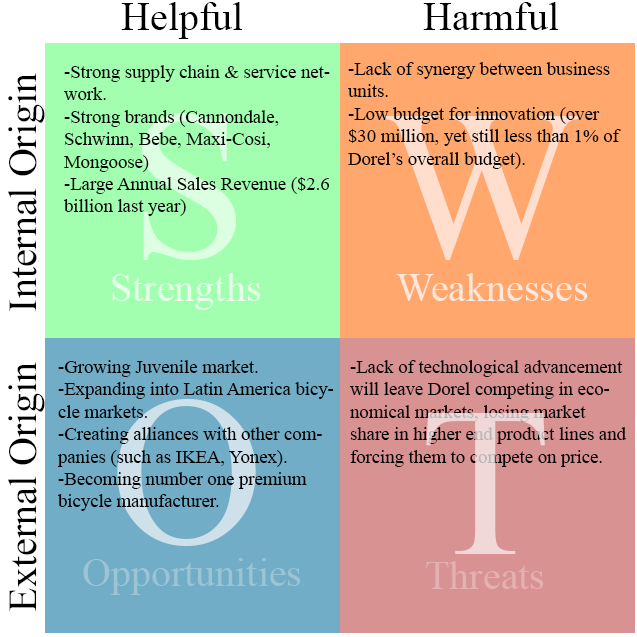
<style>
.page{position:relative;width:637px;height:637px}
.page>*{position:absolute;margin:0}
.t1{font:40px "TimesNewRomanPSMT";color:#000000}
.t2{font:18.7px "TimesNewRomanPSMT";color:#000000}
.t3{font:213.4px "TimesNewRomanPSMT";color:#ddffe1}
.t4{font:213.4px "TimesNewRomanPSMT";color:#ffdecd}
.t5{font:40px "TimesNewRomanPSMT";color:#e6ffea}
.t6{font:40px "TimesNewRomanPSMT";color:#ffe8db}
.t7{font:213.4px "TimesNewRomanPSMT";color:#cee0e9}
.t8{font:213.4px "TimesNewRomanPSMT";color:#f0d8d8}
.t9{font:40px "TimesNewRomanPSMT";color:#9cc4d5}
.t10{font:40px "TimesNewRomanPSMT";color:#e3b1b1}
</style>
<div class="page">
<p class="t1" style="left:121px;top:2px;width:438px;height:37px">Helpful                  Harmful</p>
<p class="t2" style="left:63px;top:65px;width:267px;height:151px">-Strong supply chain &amp; service network.<br>-Strong brands (Cannondale, Schwinn, Bebe, Maxi-Cosi, <br>Mongoose)<br>-Large Annual Sales Revenue ($2.6 billion last year)</p>
<p class="t2" style="left:348px;top:62px;width:273px;height:107px">-Lack of synergy between business units.<br>-Low budget for innovation (over $30 million, yet still less than 1% of Dorel’s overall budget).</p>
<p class="t1" style="left:8px;top:73px;width:37px;height:539px;rotate:-90deg">External Origin     Internal Origin</p>
<p class="t3" style="left:142px;top:113px;width:95px;height:147px">S</p>
<p class="t4" style="left:382px;top:116px;width:198px;height:144px">W</p>
<p class="t5" style="left:112px;top:273px;width:149px;height:37px">Strengths</p>
<p class="t6" style="left:396px;top:273px;width:192px;height:28px">Weaknesses</p>
<p class="t2" style="left:57px;top:360px;width:277px;height:151px">-Growing Juvenile market.<br>-Expanding into Latin America bicycle markets.<br>-Creating alliances with other companies (such as IKEA, Yonex).<br>-Becoming number one premium bicycle manufacturer.</p>
<p class="t2" style="left:349px;top:360px;width:277px;height:107px">-Lack of technological advancement will leave Dorel competing in economical markets, losing market share in higher end product lines and forcing them to compete on price.</p>
<p class="t7" style="left:117px;top:399px;width:139px;height:147px">O</p>
<p class="t8" style="left:426px;top:413px;width:119px;height:141px">T</p>
<p class="t9" style="left:83px;top:558px;width:218px;height:37px">Opportunities</p>
<p class="t10" style="left:426px;top:561px;width:118px;height:28px">Threats</p>
</div>
